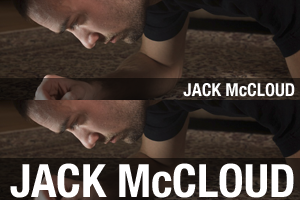
<style>
.page{position:relative;width:300px;height:200px}
.page>*{position:absolute;margin:0}
.t1{font:18px "HelveticaNeue-CondensedBold";color:#ffffff;text-transform:uppercase}
.t2{font:18px "HelveticaNeue-CondensedBold";color:#ffffff}
.t3{font:46px "HelveticaNeue-CondensedBold";color:#ffffff;text-transform:uppercase}
.t4{font:46px "HelveticaNeue-CondensedBold";color:#ffffff}
</style>
<div class="page">
<p class="t1" style="left:183px;top:83px;width:112px;height:14px">jack m<span class="t2">c</span>cloud</p>
<p class="t3" style="left:10px;top:163px;width:284px;height:35px">jack m<span class="t4">c</span>cloud</p>
</div>
